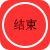
<style>
.page{position:relative;width:50px;height:50px;background:#ff3232}
.page>*{position:absolute;margin:0}
.t1{font:12px "NSimSun";color:#000000}
</style>
<div class="page">
<p class="t1" style="left:14px;top:19px;width:23px;height:12px">结束</p>
</div>
